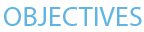
<style>
.page{position:relative;width:144px;height:32px;background:#ffffff}
.page>*{position:absolute;margin:0}
.t1{font:28px "MyriadPro-Regular";color:#61b5e3}
</style>
<div class="page">
<p class="t1" style="left:4px;top:7px;width:138px;height:19px">OBJECTIVES</p>
</div>
